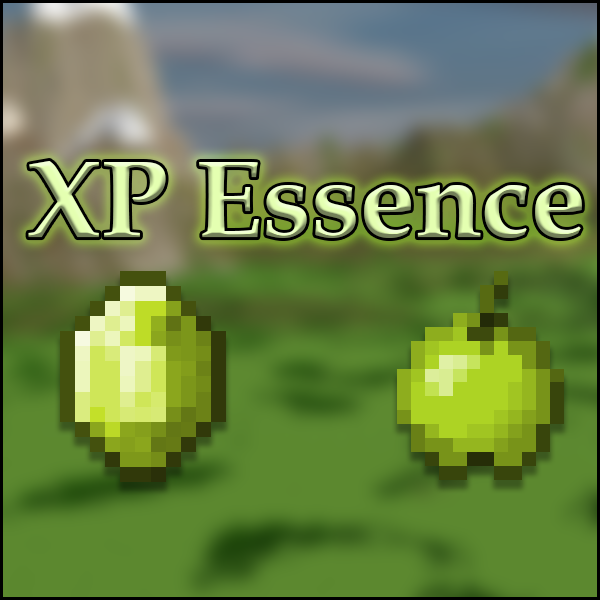
<style>
.page{position:relative;width:600px;height:600px}
.page>*{position:absolute;margin:0}
.t1{font:110px "BookAntiqua-Bold"}
</style>
<div class="page">
<p class="t1" style="left:28px;top:161px;width:554px;height:77px">XP Essence</p>
</div>
